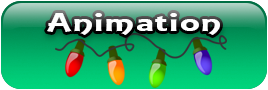
<style>
.page{position:relative;width:268px;height:90px}
.page>*{position:absolute;margin:0}
.t1{font:27.3px "ARESSENCE";letter-spacing:0.04em;color:#fefefe;scale:1.64 1}
</style>
<div class="page">
<p class="t1" style="left:47px;top:13px;width:173px;height:22px">Animation</p>
</div>
